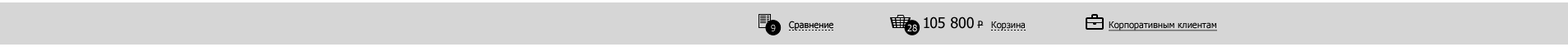
<style>
.page{position:relative;width:1568px;height:47px;background:#d6d6d6}
.page>*{position:absolute;margin:0}
.t1{font:14.8px "Tahoma";color:#000000}
.t2{font:9.9px "Tahoma";color:#000000}
.t3{font:9px "Tahoma"}
.t4{font:9px "Tahoma";color:#000000}
.t5{font:9px "Tahoma";color:#ffffff}
.t6{font:9px "Tahoma";color:#000000;text-decoration:underline}
</style>
<div class="page">
<p class="t1" style="left:924px;top:16px;width:60px;height:13px">105 800 <span class="t2">P</span></p>
<p class="t3" style="left:771px;top:24px;width:5px;height:8px">9</p>
<p class="t4" style="left:789px;top:21px;width:44px;height:9px">Сравнение</p>
<p class="t5" style="left:907px;top:24px;width:10px;height:8px">28</p>
<p class="t4" style="left:991px;top:21px;width:34px;height:9px">Корзина</p>
<p class="t6" style="left:1109px;top:21px;width:108px;height:10px">Корпоративным клиентам</p>
</div>
